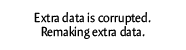
<style>
.page{position:relative;width:186px;height:50px;background:#ffffff}
.page>*{position:absolute;margin:0}
.t1{font:13.2px "Amira-Roman";color:#000000;scale:0.91 1}
</style>
<div class="page">
<p class="t1" style="left:34px;top:12px;width:117px;height:27px;text-align:center">Extra data is corrupted. <br>Remaking extra data.</p>
</div>
